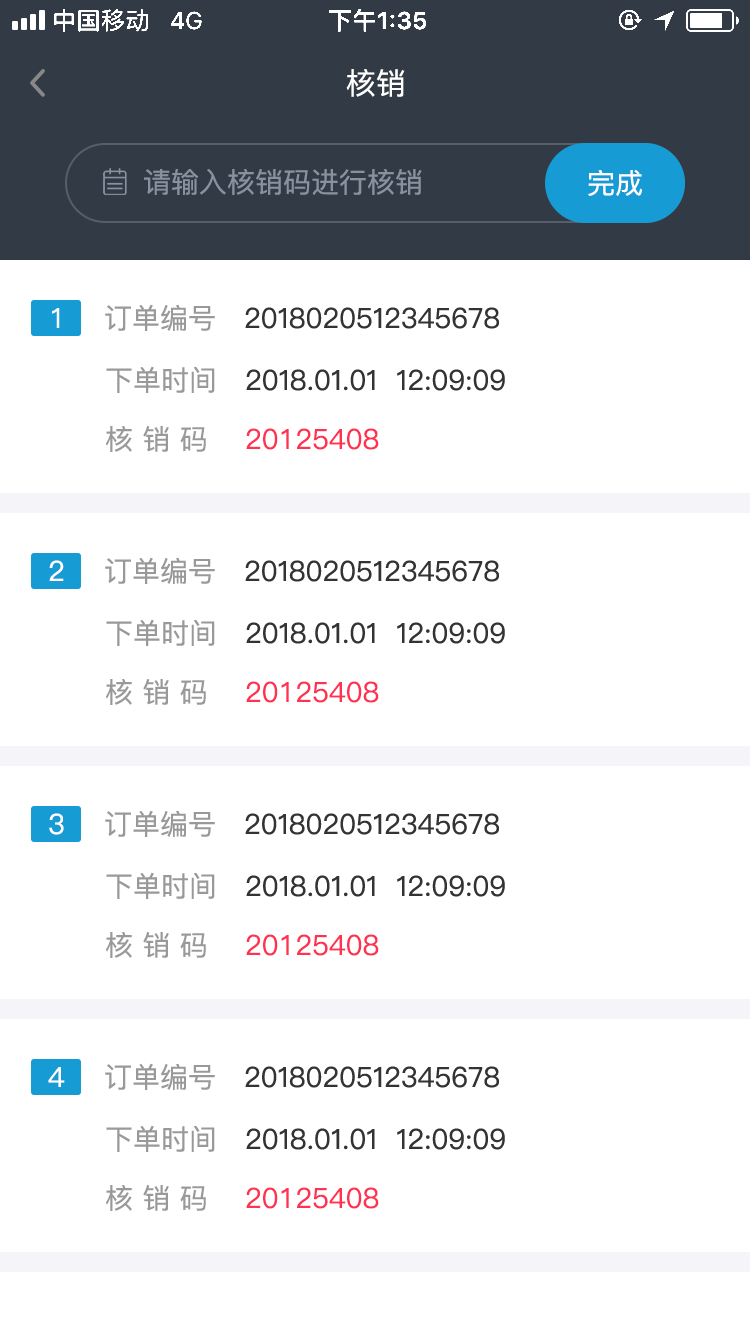
<style>
.page{position:relative;width:750px;height:1334px;background:#ffffff}
.page>*{position:absolute;margin:0}
.t1{font:30px "PingFang-SC-Medium";color:#ffffff}
.t2{font:28px "PingFang-SC-Medium";color:#87919f}
.t3{font:28px "PingFang-SC-Medium";color:#ffffff}
.t4{font:28px "PingFangSC-Regular";color:#333333}
.t5{font:28px "PingFangSC-Regular";color:#999999}
.t6{font:28px "PingFangSC-Regular";color:#ffffff}
.t7{font:28px "PingFang-SC-Medium";color:#ff3252}
.t8{font:28px "PingFang-SC-Medium";color:#999999}
</style>
<div class="page">
<p class="t1" style="left:346px;top:69px;width:59px;height:28px">核销</p>
<p class="t2" style="left:144px;top:169px;width:278px;height:26px">请输入核销码进行核销</p>
<p class="t3" style="left:588px;top:170px;width:54px;height:26px">完成</p>
<p class="t4" style="left:105px;top:304px;width:394px;height:27px"><span class="t5">订单编号   </span>2018020512345678</p>
<p class="t6" style="left:52px;top:308px;width:8px;height:20px">1</p>
<p class="t4" style="left:106px;top:366px;width:399px;height:27px"><span class="t5">下单时间   </span>2018.01.01  12:09:09</p>
<p class="t7" style="left:106px;top:426px;width:273px;height:26px"><span class="t8">核 销 码   </span> 20125408</p>
<p class="t4" style="left:105px;top:557px;width:394px;height:27px"><span class="t5">订单编号   </span>2018020512345678</p>
<p class="t3" style="left:49px;top:560px;width:15px;height:21px">2</p>
<p class="t4" style="left:106px;top:619px;width:399px;height:27px"><span class="t5">下单时间   </span>2018.01.01  12:09:09</p>
<p class="t7" style="left:106px;top:679px;width:273px;height:26px"><span class="t8">核 销 码   </span> 20125408</p>
<p class="t3" style="left:49px;top:813px;width:15px;height:22px">3</p>
<p class="t4" style="left:105px;top:810px;width:394px;height:27px"><span class="t5">订单编号   </span>2018020512345678</p>
<p class="t4" style="left:106px;top:872px;width:399px;height:27px"><span class="t5">下单时间   </span>2018.01.01  12:09:09</p>
<p class="t7" style="left:106px;top:932px;width:273px;height:26px"><span class="t8">核 销 码   </span> 20125408</p>
<p class="t3" style="left:48px;top:1067px;width:17px;height:20px">4</p>
<p class="t4" style="left:105px;top:1063px;width:394px;height:27px"><span class="t5">订单编号   </span>2018020512345678</p>
<p class="t4" style="left:106px;top:1125px;width:399px;height:27px"><span class="t5">下单时间   </span>2018.01.01  12:09:09</p>
<p class="t7" style="left:106px;top:1185px;width:273px;height:26px"><span class="t8">核 销 码   </span> 20125408</p>
</div>
